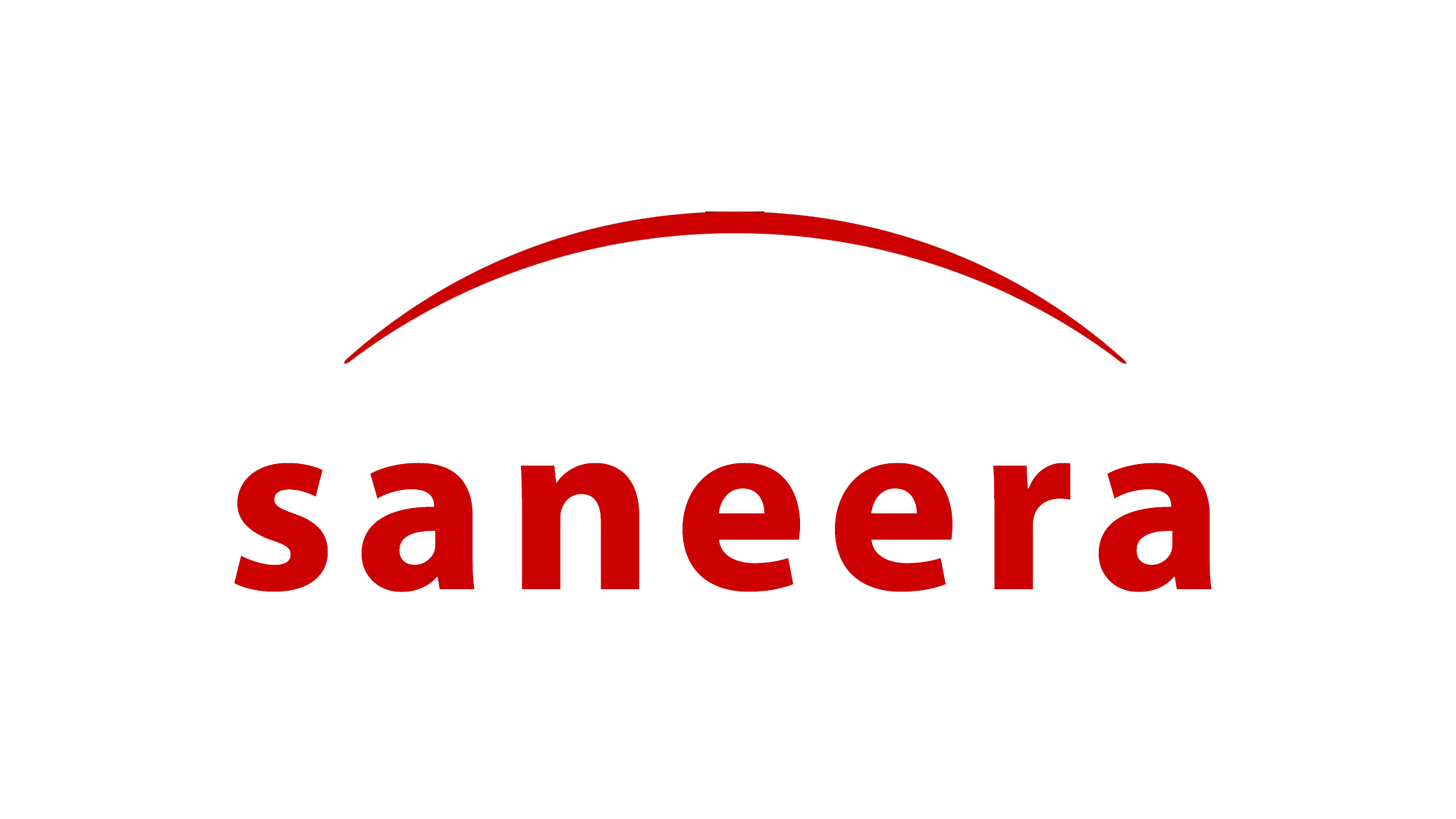
<style>
.page{position:relative;width:1456px;height:819px;background:#ffffff}
.page>*{position:absolute;margin:0}
.t1{font:252.8px "MyriadPro-Bold";letter-spacing:0.075em;color:#cc0000}
</style>
<div class="page">
<p class="t1" style="left:234px;top:463px;width:978px;height:129px">saneera</p>
</div>
